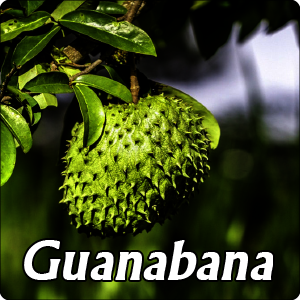
<style>
.page{position:relative;width:300px;height:300px}
.page>*{position:absolute;margin:0}
.t1{font:55.6px "Narkisim";color:#ffffff;font-weight:bold;font-style:italic}
</style>
<div class="page">
<p class="t1" style="left:24px;top:240px;width:249px;height:40px">Guanabana</p>
</div>
